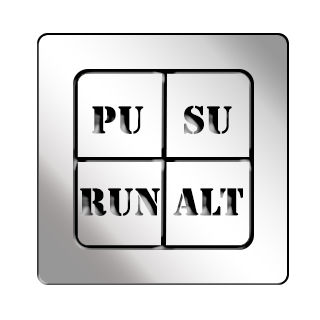
<style>
.page{position:relative;width:320px;height:320px;background:#ffffff}
.page>*{position:absolute;margin:0}
.t1{font:36px "StencilStd";color:#000000}
.t2{font:36px "StencilStd"}
</style>
<div class="page">
<p class="t1" style="left:92px;top:106px;width:52px;height:28px">PU</p>
<p class="t2" style="left:184px;top:105px;width:48px;height:29px">SU</p>
<p class="t2" style="left:80px;top:188px;width:80px;height:28px">Run</p>
<p class="t2" style="left:173px;top:188px;width:70px;height:28px">Alt</p>
</div>
